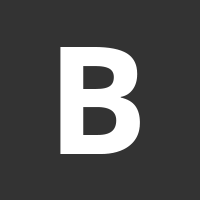
<style>
.page{position:relative;width:200px;height:200px;background:#333333}
.page>*{position:absolute;margin:0}
.t1{font:150px "OpenSans-Bold";color:#ffffff}
</style>
<div class="page">
<p class="t1" style="left:60px;top:47px;width:80px;height:107px">B</p>
</div>
